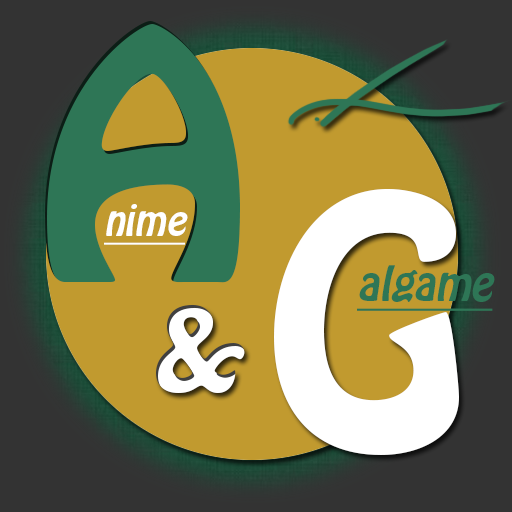
<style>
.page{position:relative;width:512px;height:512px;background:#c19a2f}
.page>*{position:absolute;margin:0}
.t1{font:308px "HoboStd";color:#2e7656}
.t2{font:308px "HoboStd";color:#ffffff}
.t3{font:37px "HoboStd";color:#ffffff;font-style:italic;text-decoration:underline}
.t4{font:42px "HoboStd";color:#2e7656;font-style:italic;text-decoration:underline}
.t5{font:103px "HoboStd";color:#ffffff}
</style>
<div class="page">
<p class="t1" style="left:45px;top:21px;width:195px;height:262px">A</p>
<p class="t2" style="left:274px;top:189px;width:185px;height:266px">G</p>
<p class="t3" style="left:104px;top:204px;width:84px;height:41px">nime</p>
<p class="t4" style="left:357px;top:265px;width:138px;height:46px">algame</p>
<p class="t5" style="left:156px;top:304px;width:89px;height:89px">&amp;</p>
</div>
